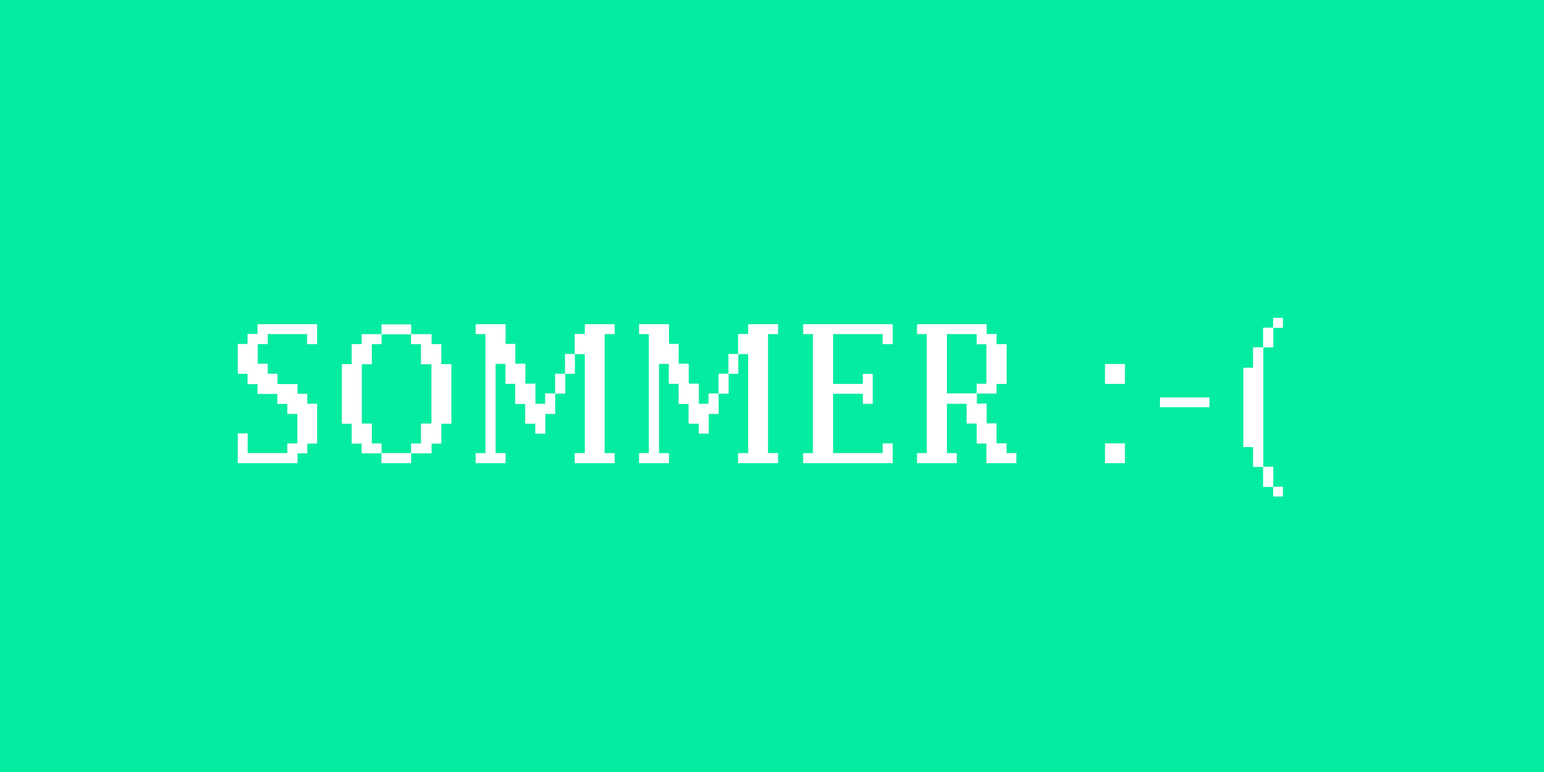
<style>
.page{position:relative;width:1544px;height:772px;background:#03eca2}
.page>*{position:absolute;margin:0}
.t1{font:238.3px "EmigreFourTeen";letter-spacing:0.02em;color:#ffffff}
</style>
<div class="page">
<p class="t1" style="left:237px;top:318px;width:1047px;height:179px">SOMMER :-(</p>
</div>
